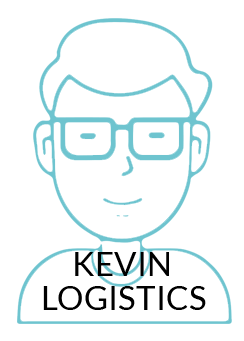
<style>
.page{position:relative;width:244px;height:341px;background:#ffffff}
.page>*{position:absolute;margin:0}
.t1{font:33.3px "Lato-Regular";color:#000000}
</style>
<div class="page">
<p class="t1" style="left:75px;top:252px;width:94px;height:24px">KEVIN</p>
<p class="t1" style="left:43px;top:286px;width:163px;height:24px">LOGISTICS</p>
</div>
